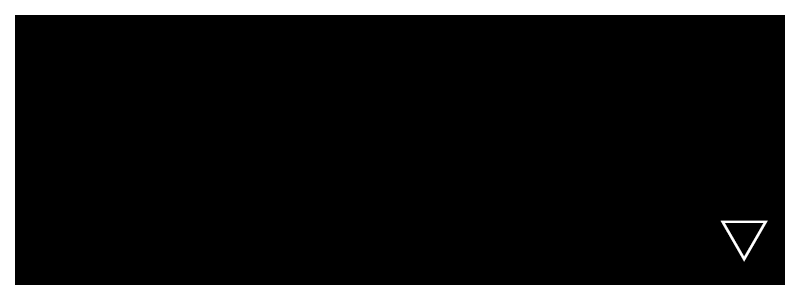
<style>
.page{position:relative;width:800px;height:300px;background:#000000}
.page>*{position:absolute;margin:0}
.t1{font:49.8px "AdobeGothicStd-Bold";color:#ffffff}
</style>
<div class="page">
<p class="t1" style="left:720px;top:220px;width:48px;height:42px">▽</p>
</div>
